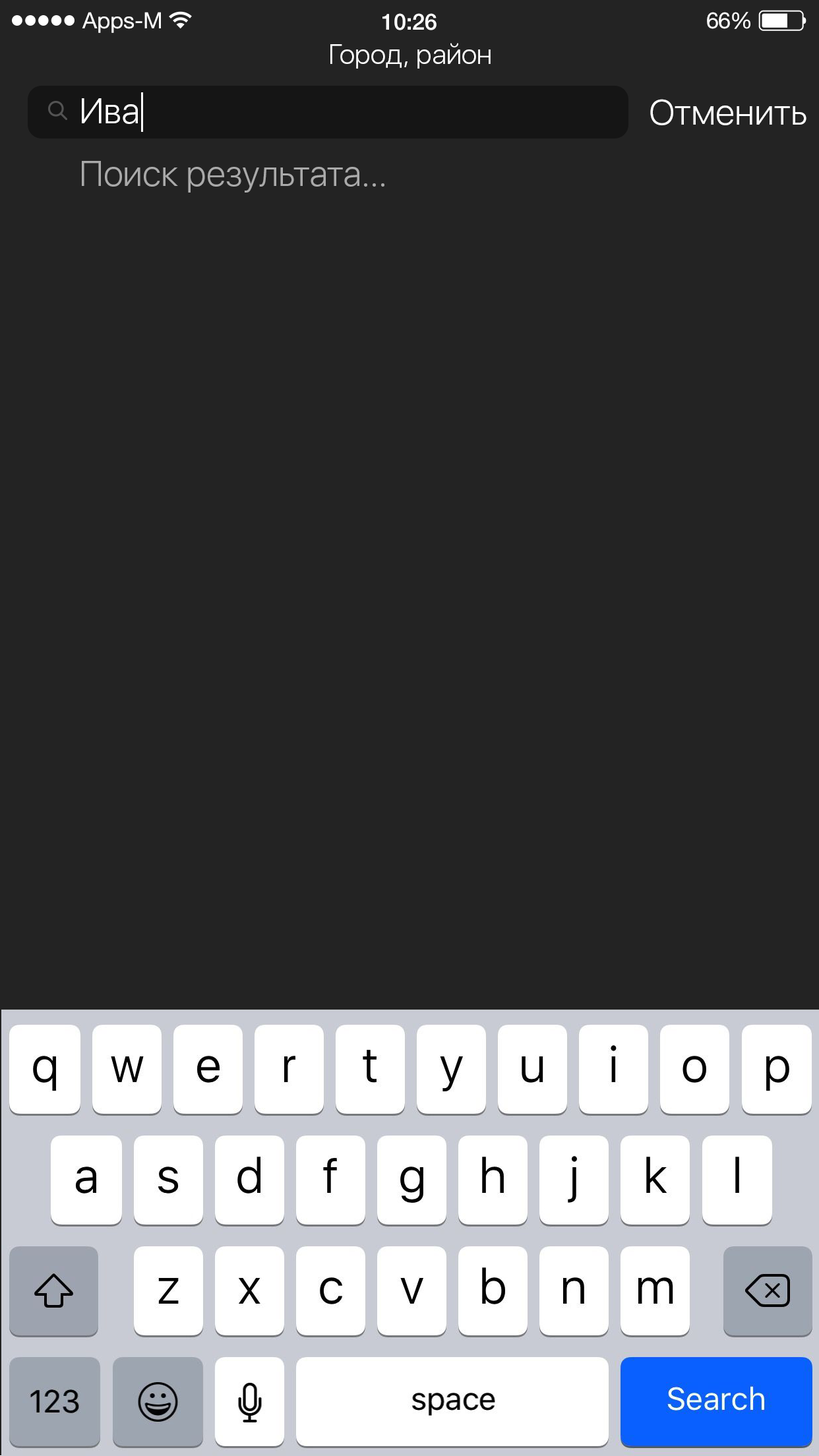
<style>
.page{position:relative;width:819px;height:1456px;background:#232323}
.page>*{position:absolute;margin:0}
.t1{font:22.5px "HelveticaNeue";color:#ffffff}
.t2{font:22.4px "HelveticaNeue-Medium";color:#ffffff}
.t3{font:22.5px "HelveticaNeue";letter-spacing:-0.02em;color:#ffffff}
.t4{font:27.7px "SFUIDisplay-Light";color:#ffffff}
.t5{font:35.6px "SFUIDisplay-Light";color:#ffffff}
.t6{font:35.6px "SFUIDisplay-Light";color:#aaaaaa}
</style>
<div class="page">
<p class="t1" style="left:82px;top:12px;width:79px;height:21px">Apps-M</p>
<p class="t2" style="left:382px;top:13px;width:55px;height:17px">10:26</p>
<p class="t1" style="left:707px;top:12px;width:43px;height:17px">6<span class="t3">6</span>%</p>
<p class="t4" style="left:330px;top:43px;width:161px;height:26px">Город, район</p>
<p class="t5" style="left:82px;top:98px;width:56px;height:26px">Ива</p>
<p class="t5" style="left:650px;top:99px;width:156px;height:26px">Отменить</p>
<p class="t6" style="left:82px;top:161px;width:302px;height:32px">Поиск результата...</p>
</div>
